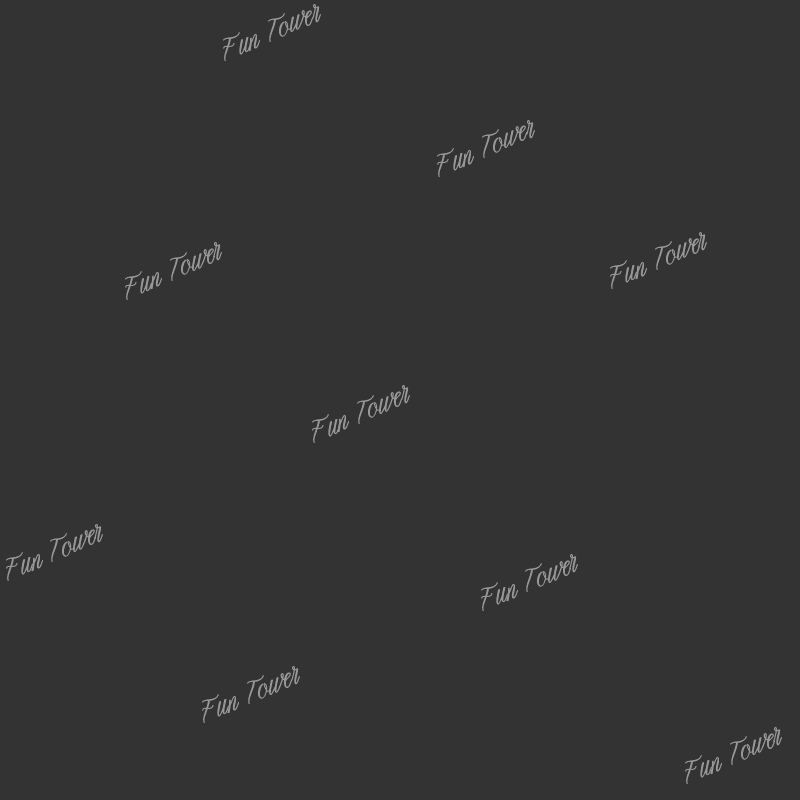
<style>
.page{position:relative;width:800px;height:800px;background:#333333}
.page>*{position:absolute;margin:0}
.t1{font:22.4px "araura";color:#979797}
</style>
<div class="page">
<p class="t1" style="left:223px;top:4px;width:98px;height:57px;rotate:-23deg">Fun Tower</p>
<p class="t1" style="left:437px;top:120px;width:98px;height:57px;rotate:-23deg">Fun Tower</p>
<p class="t1" style="left:610px;top:232px;width:97px;height:57px;rotate:-23deg">Fun Tower</p>
<p class="t1" style="left:125px;top:242px;width:97px;height:58px;rotate:-23deg">Fun Tower</p>
<p class="t1" style="left:312px;top:385px;width:98px;height:58px;rotate:-23deg">Fun Tower</p>
<p class="t1" style="left:6px;top:524px;width:97px;height:57px;rotate:-23deg">Fun Tower</p>
<p class="t1" style="left:481px;top:554px;width:97px;height:57px;rotate:-23deg">Fun Tower</p>
<p class="t1" style="left:202px;top:666px;width:98px;height:57px;rotate:-23deg">Fun Tower</p>
<p class="t1" style="left:685px;top:727px;width:97px;height:57px;rotate:-23deg">Fun Tower</p>
</div>
